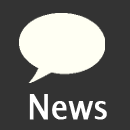
<style>
.page{position:relative;width:130px;height:130px;background:#333333}
.page>*{position:absolute;margin:0}
.t1{font:34px "LucidaSansUnicode";color:#ffffff;font-weight:bold;scale:0.9 1}
</style>
<div class="page">
<p class="t1" style="left:29px;top:94px;width:78px;height:26px">News</p>
</div>
